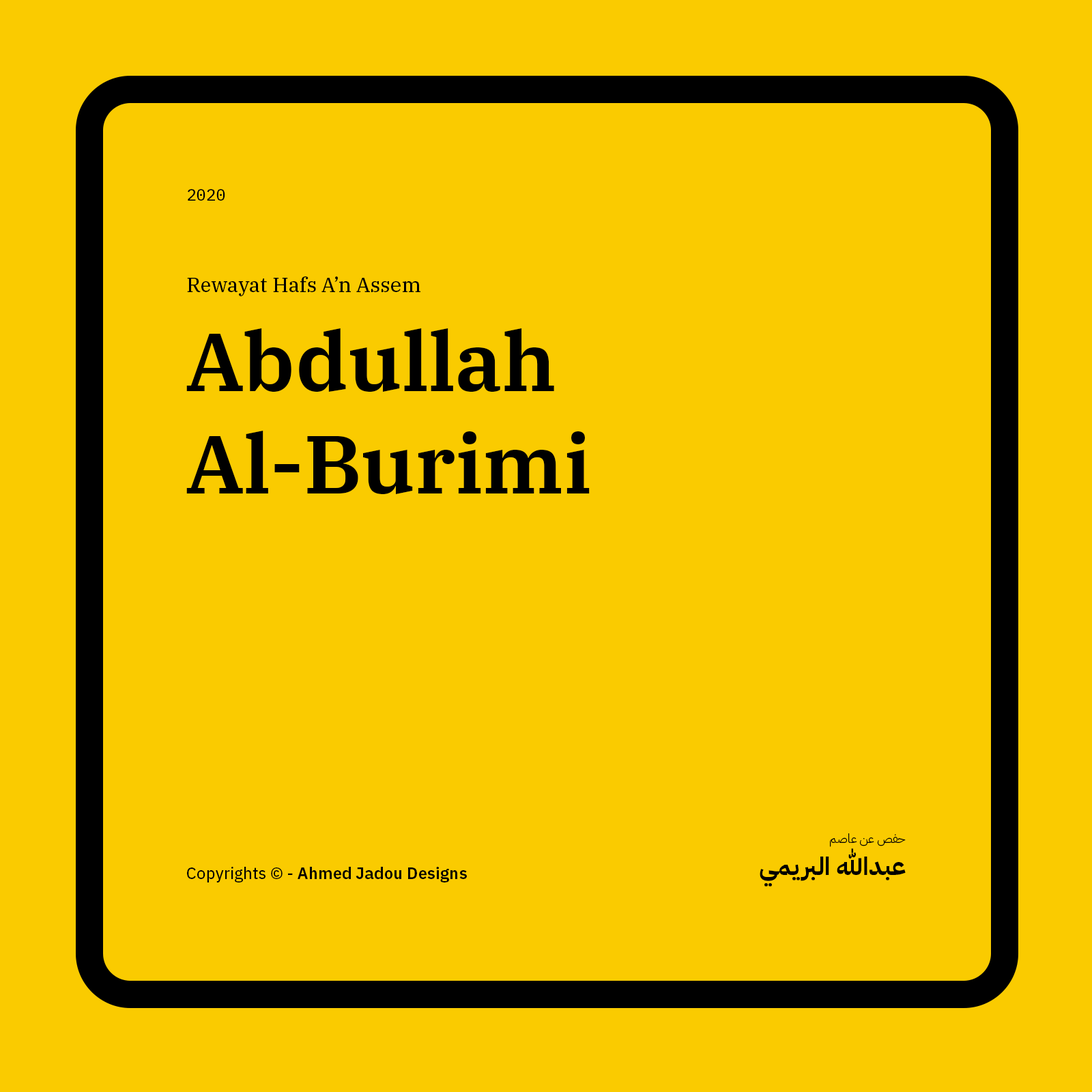
<style>
.page{position:relative;width:1092px;height:1092px;background:#facb00}
.page>*{position:absolute;margin:0}
.t1{font:16.4px "IBMPlexMono-Text";color:#000000}
.t2{font:20.5px "IBMPlexSerif-Text";color:#000000}
.t3{font:81.9px/102.7px "IBMPlexSerif-SemiBold";color:#000000}
.t4{font:12.3px "IBMPlexArabic-Light";color:#000000}
.t5{font:24.6px "IBMPlexArabic-Bold";color:#000000}
.t6{font:16.4px "IBMPlexSans-SemiBold";color:#000000}
.t7{font:16.4px "IBMPlexSans-Text";color:#000000}
</style>
<div class="page">
<p class="t1" style="left:188px;top:189px;width:37px;height:12px">2020</p>
<p class="t2" style="left:187px;top:276px;width:233px;height:20px">Rewayat Hafs A’n Assem</p>
<p class="t3" style="left:186px;top:328px;width:404px;height:166px">Abdullah Al-Burimi</p>
<p class="t4" style="left:830px;top:833px;width:76px;height:14px">حفص عن عاصم</p>
<p class="t5" style="left:760px;top:848px;width:146px;height:39px">عبدالله البريمي</p>
<p class="t6" style="left:187px;top:867px;width:280px;height:15px"><span class="t7">Copyrights © - </span>Ahmed Jadou Designs</p>
</div>
